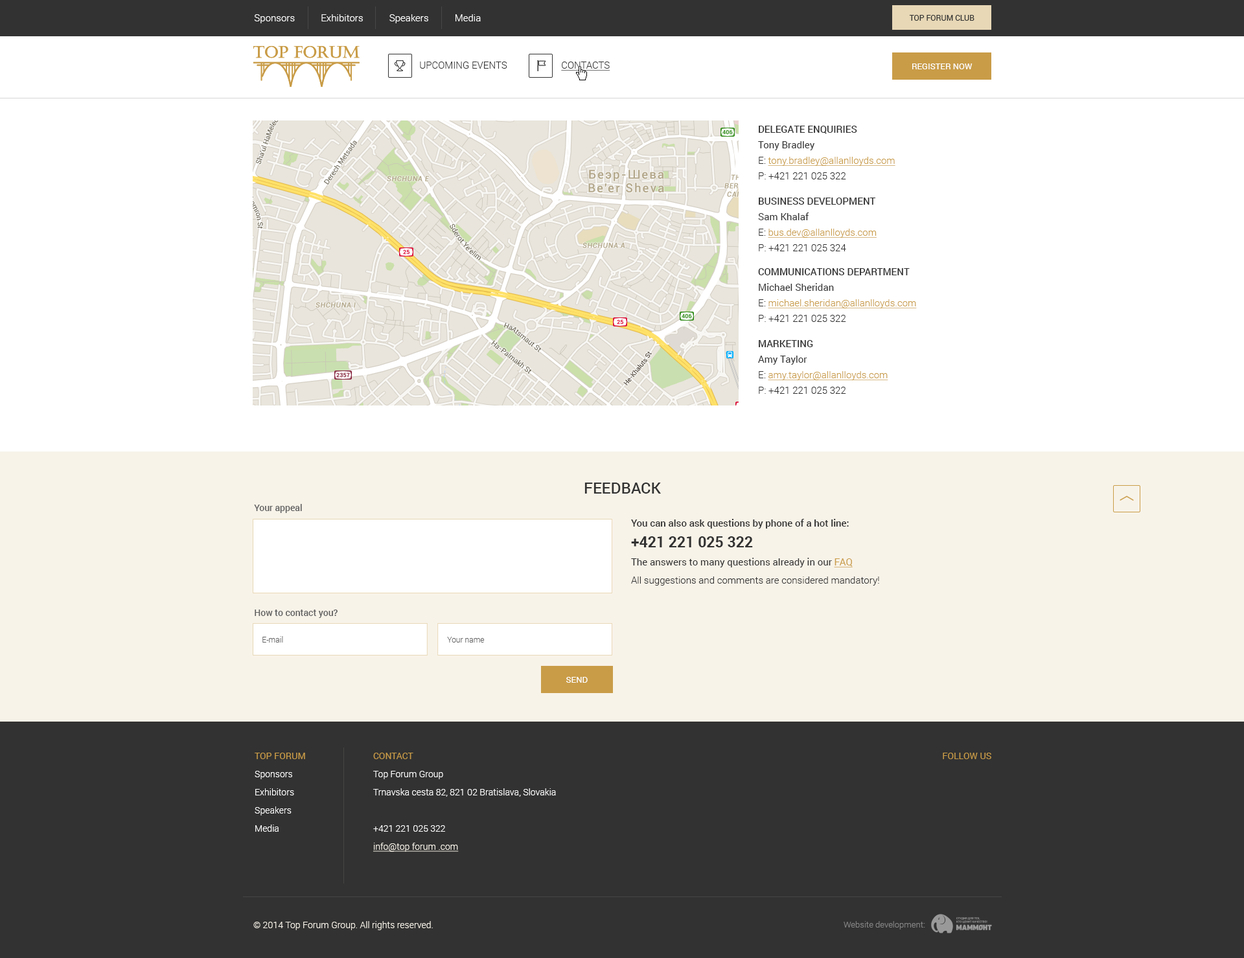
<style>
.page{position:relative;width:1244px;height:958px;background:#ffffff}
.page>*{position:absolute;margin:0}
.t1{font:9.7px "Roboto-Light";color:#ffffff}
.t2{font:7.8px "Roboto-Regular";color:#323232}
.t3{font:9.7px "Roboto-Light";color:#323232}
.t4{font:9.7px "Roboto-Light";color:#323232;text-decoration:underline}
.t5{font:8.4px "Roboto-Regular";color:#ffffff}
.t6{font:9.7px/13px "Roboto-Light";color:#c99c47;text-decoration:underline}
.t7{font:9.7px/13px "Roboto-Medium";color:#323232;text-transform:uppercase}
.t8{font:9.7px/13px "Roboto-Regular";color:#323232}
.t9{font:9.7px/13px "Roboto-Light";color:#323232}
.t10{font:15.6px "Roboto-Medium";color:#323232}
.t11{font:9.1px "Roboto-Medium";color:#606060}
.t12{font:9.7px/13px "Roboto-Medium";color:#323232}
.t13{font:14.9px/15.6px "Roboto-Bold";color:#323232}
.t14{font:9.7px/13px "Roboto-Regular";color:#c99c47;text-decoration:underline}
.t15{font:7.8px "Roboto-Light";color:#606060}
.t16{font:9.1px/14.3px "Roboto-Light";color:#ffffff}
.t17{font:9.1px/14.3px "Roboto-Regular";color:#c99c47}
.t18{font:9.1px/14.3px "Roboto-Light";color:#f8f3e9;text-decoration:underline}
.t19{font:9.1px "Roboto-Regular";color:#c99c47}
.t20{font:9.1px "Roboto-Light";color:#f8f3e9}
.t21{font:8.4px "Roboto-Light";color:#858585}
</style>
<div class="page">
<p class="t1" style="left:254px;top:14px;width:227px;height:9px">Sponsors           Exhibitors           Speakers           Media</p>
<p class="t2" style="left:909px;top:15px;width:66px;height:6px">TOP FORUM CLUB</p>
<p class="t3" style="left:420px;top:62px;width:87px;height:7px">UPCOMING EVENTS</p>
<p class="t4" style="left:561px;top:62px;width:49px;height:9px">CONTACTS</p>
<p class="t5" style="left:912px;top:64px;width:61px;height:5px">REGISTER NOW</p>
<p class="t6" style="left:758px;top:126px;width:138px;height:53px"><span class="t7">DELEGATE ENQUIRIES<br></span><span class="t8">Tony Bradley<br></span><span class="t9">E: </span>tony.bradley@allanlloyds.com<br><span class="t9">P: +421 221 025 322</span></p>
<p class="t6" style="left:758px;top:198px;width:119px;height:53px"><span class="t7">BUSINESS DEVELOPMENT<br></span><span class="t8">Sam Khalaf<br></span><span class="t9">E: </span>bus.dev@allanlloyds.com<br><span class="t9">P: +421 221 025 324</span></p>
<p class="t6" style="left:758px;top:268px;width:159px;height:54px"><span class="t7">COMMUNICATIONS DEPARTMENT<br></span><span class="t8">Michael Sheridan<br></span><span class="t9">E: </span>michael.sheridan@allanlloyds.com<br><span class="t9">P: +421 221 025 322</span></p>
<p class="t6" style="left:758px;top:340px;width:130px;height:54px"><span class="t7">MARKETING<br></span><span class="t8">Amy Taylor<br></span><span class="t9">E: </span>amy.taylor@allanlloyds.com<br><span class="t9">P: +421 221 025 322</span></p>
<p class="t10" style="left:585px;top:483px;width:76px;height:11px">FEEDBACK</p>
<p class="t11" style="left:254px;top:504px;width:48px;height:9px">Your appeal</p>
<p class="t9" style="left:631px;top:519px;width:248px;height:67px"><span class="t12">You can also ask questions by phone of a hot line:<br></span><span class="t13">+421 221 025 322<br></span><span class="t8">The answers to many questions already in our </span><span class="t14">FAQ<br></span>All suggestions and comments are considered mandatory!</p>
<p class="t11" style="left:255px;top:610px;width:83px;height:8px">How to contact you?</p>
<p class="t15" style="left:262px;top:636px;width:21px;height:7px">E-mail</p>
<p class="t15" style="left:447px;top:637px;width:38px;height:6px">Your name</p>
<p class="t5" style="left:566px;top:677px;width:22px;height:6px">SEND</p>
<p class="t16" style="left:255px;top:753px;width:50px;height:79px;text-align:justify"><span class="t17">TOP FORUM<br></span>Sponsors<br>Exhibitors <br>Speakers<br>Media</p>
<p class="t16" style="left:373px;top:753px;width:183px;height:99px;text-align:justify"><span class="t17">CONTACT<br></span>Top Forum Group<br>Trnavska cesta 82, 821 02 Bratislava, Slovakia<br> <br>+421 221 025 322<br><span class="t18">info@top forum .com</span></p>
<p class="t19" style="left:943px;top:753px;width:48px;height:6px">FOLLOW US</p>
<p class="t20" style="left:253px;top:921px;width:180px;height:10px">© 2014 Top Forum Group. All rights reserved.</p>
<p class="t21" style="left:844px;top:921px;width:81px;height:9px">Website development:</p>
</div>
